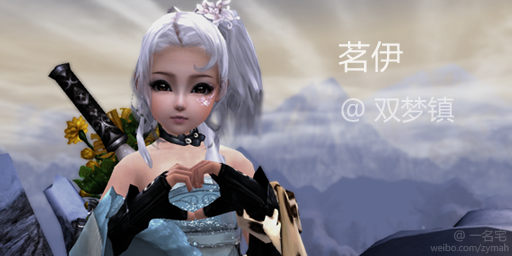
<style>
.page{position:relative;width:512px;height:256px}
.page>*{position:absolute;margin:0}
.t1{font:32.4px "MicrosoftYaHei";color:#ffffff}
.t2{font:27px "MicrosoftYaHei";color:#e7e8eb}
.t3{font:12.6px "MicrosoftYaHei";color:#5a5b68}
.t4{font:9px "MicrosoftYaHei";color:#5b5b67}
</style>
<div class="page">
<p class="t1" style="left:338px;top:41px;width:65px;height:32px">茗伊</p>
<p class="t2" style="left:341px;top:96px;width:113px;height:27px">@双梦镇</p>
<p class="t3" style="left:453px;top:229px;width:54px;height:13px">@一名宅</p>
<p class="t4" style="left:430px;top:243px;width:79px;height:11px">weibo.com/zymah</p>
</div>
